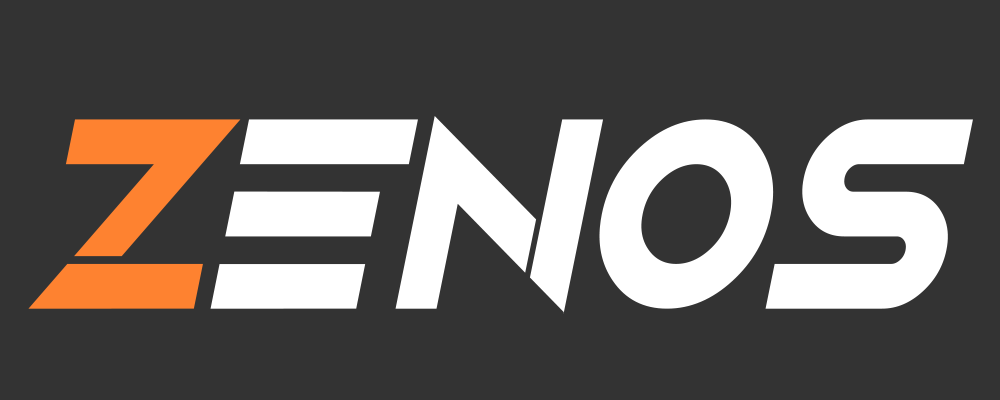
<style>
.page{position:relative;width:1000px;height:400px;background:#333333}
.page>*{position:absolute;margin:0}
.t1{font:269.2px "Alternity-BoldItalic";color:#ffffff;scale:0.89 1}
.t2{font:269.2px "Alternity-BoldItalic";color:#fe8230;scale:0.89 1}
</style>
<div class="page">
<p class="t1" style="left:28px;top:116px;width:945px;height:198px"><span class="t2">Z</span>ENOS</p>
</div>
